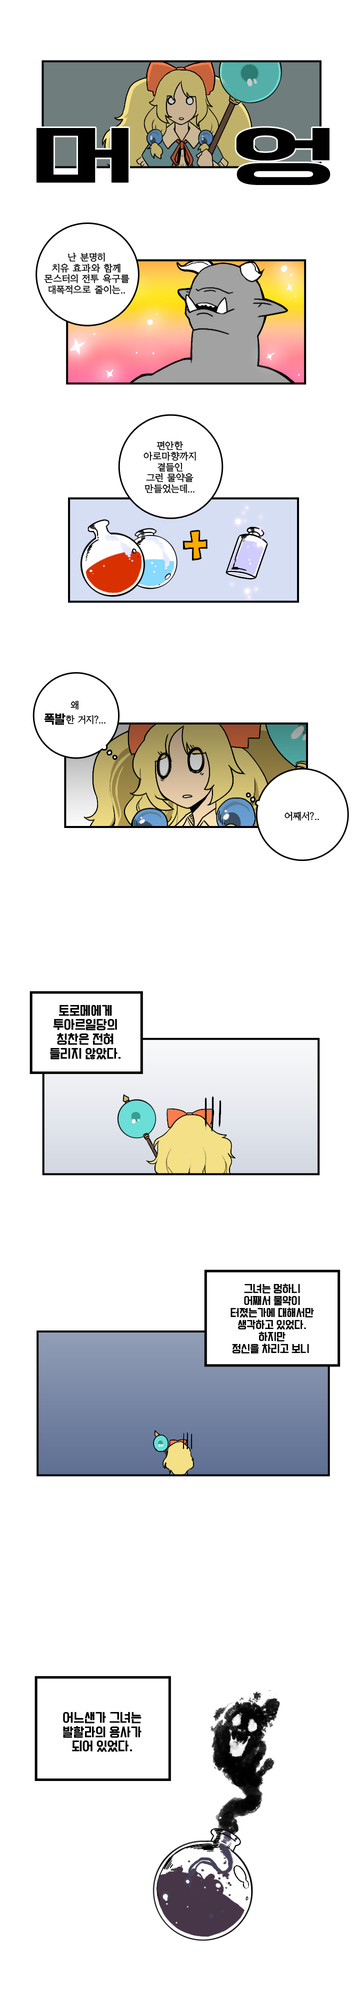
<style>
.page{position:relative;width:360px;height:2000px;background:#ffffff}
.page>*{position:absolute;margin:0}
.t1{font:9px "KoreanYMJ-B";color:#000000}
.t2{font:12px "TTComsetakR";color:#000000}
.t3{font:10px "TTComsetakR";color:#000000}
</style>
<div class="page">
<p class="t1" style="left:44px;top:252px;width:86px;height:42px;text-align:center">난 분명히<br>치유 효과와 함께<br>몬스터의 전투 욕구를<br>대폭적으로 줄이는..</p>
<p class="t1" style="left:144px;top:441px;width:52px;height:53px;text-align:center">편안한<br>아로마향까지<br>곁들인<br>그런 물약을<br>만들었는데...</p>
<p class="t1" style="left:44px;top:700px;width:62px;height:25px;text-align:center">왜<br><span class="t2">폭발</span>한 거지?...</p>
<p class="t1" style="left:284px;top:812px;width:35px;height:9px">어째서?..</p>
<p class="t2" style="left:50px;top:1005px;width:70px;height:55px;text-align:center">토로메에게<br>투아르일당의<br>칭찬은 전혀<br>들리지 않았다.</p>
<p class="t3" style="left:230px;top:1284px;width:84px;height:70px;text-align:center">그녀는 멍하니<br>어째서 물약이<br>터졌는가에 대해서만<br>생각하고 있었다.<br>하지만<br>정신을 차리고 보니</p>
<p class="t2" style="left:63px;top:1712px;width:79px;height:40px;text-align:center">어느샌가 그녀는<br>발할라의 용사가<br>되어 있었다.</p>
</div>
